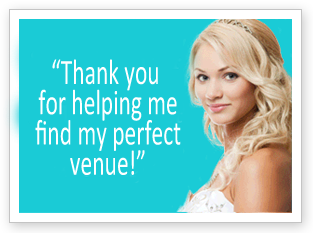
<style>
.page{position:relative;width:313px;height:233px;background:#1acbd6}
.page>*{position:absolute;margin:0}
.t1{font:36px/30.3px "Calibri";color:#ffffff;scale:0.65 1}
</style>
<div class="page">
<p class="t1" style="left:35px;top:59px;width:146px;height:116px;text-align:center">“Thank you <br>for helping me<br>find my perfect<br>venue!”</p>
</div>
